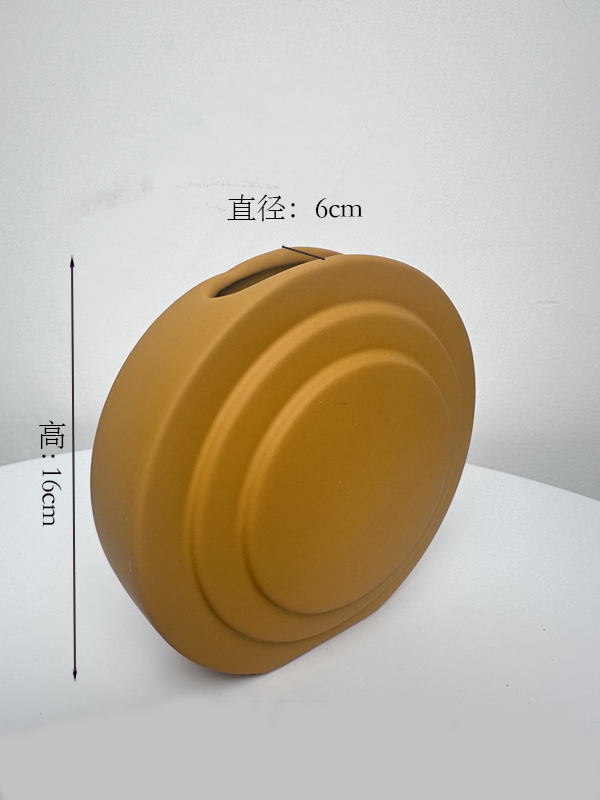
<style>
.page{position:relative;width:600px;height:800px}
.page>*{position:absolute;margin:0}
.t1{font:30px "STSong";letter-spacing:-0.02em;color:#000000}
</style>
<div class="page">
<p class="t1" style="left:227px;top:194px;width:136px;height:28px">直径：6cm</p>
<p class="t1" style="left:39px;top:420px;width:27px;height:107px">高: 16cm</p>
</div>
